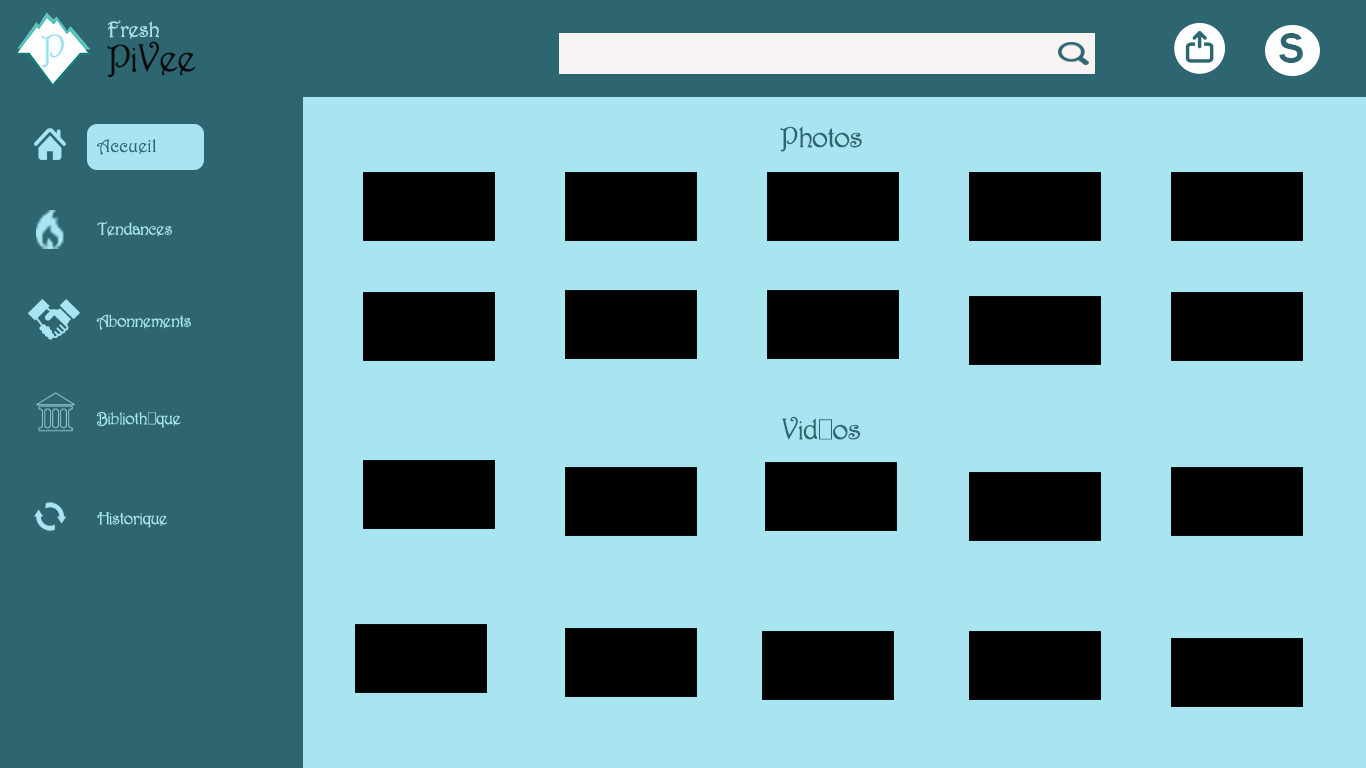
<style>
.page{position:relative;width:1366px;height:768px;background:#a9e5f0}
.page>*{position:absolute;margin:0}
.t1{font:22.4px "Harrington";color:#a9e5f0}
.t2{font:39.6px "Harrington";color:#0a0b0b}
.t3{font:44px "FranklinGothic-Medium";color:#2d6670}
.t4{font:30px "Harrington";color:#2d6670}
.t5{font:18px "Harrington";color:#a9e5f0}
</style>
<div class="page">
<p class="t1" style="left:108px;top:20px;width:51px;height:19px">Fresh</p>
<p class="t2" style="left:107px;top:41px;width:89px;height:37px">PiVee</p>
<p class="t3" style="left:1279px;top:33px;width:24px;height:30px">S</p>
<p class="t4" style="left:780px;top:126px;width:82px;height:26px">Photos</p>
<p class="t5" style="left:97px;top:221px;width:75px;height:16px">Tendances</p>
<p class="t5" style="left:96px;top:314px;width:95px;height:16px">Abonnements</p>
<p class="t5" style="left:96px;top:412px;width:85px;height:16px">Bibliothèque</p>
<p class="t4" style="left:782px;top:416px;width:79px;height:24px">Vidéos</p>
<p class="t5" style="left:97px;top:512px;width:71px;height:16px">Historique</p>
</div>
